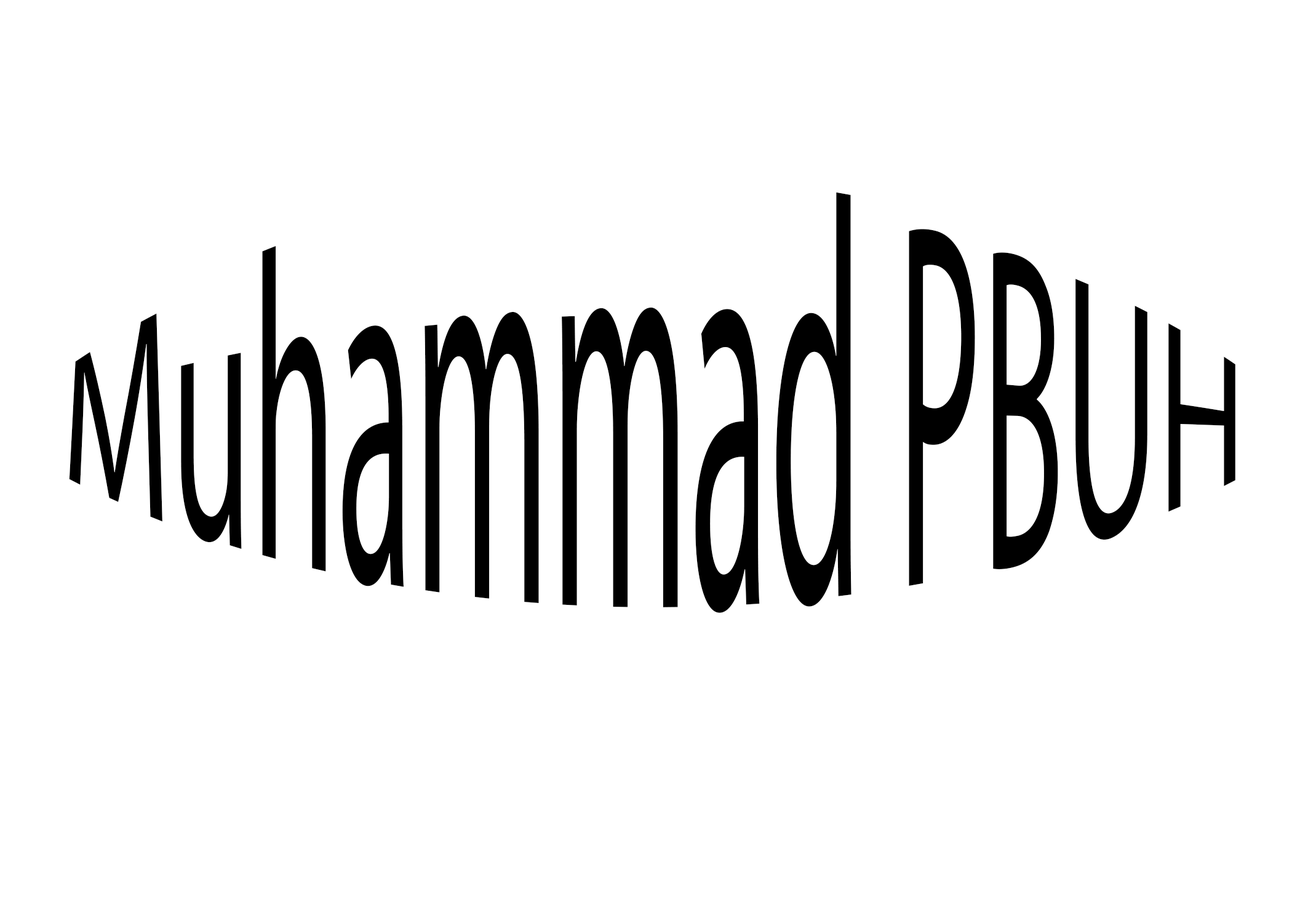
<style>
.page{position:relative;width:1292px;height:923px;background:#ffffff}
.page>*{position:absolute;margin:0}
.t1{font:153.8px "MyriadPro-Regular";color:#000000}
</style>
<div class="page">
<p class="t1" style="left:69px;top:192px;width:1166px;height:421px;text-align:center">Muhammad PBUH</p>
</div>
